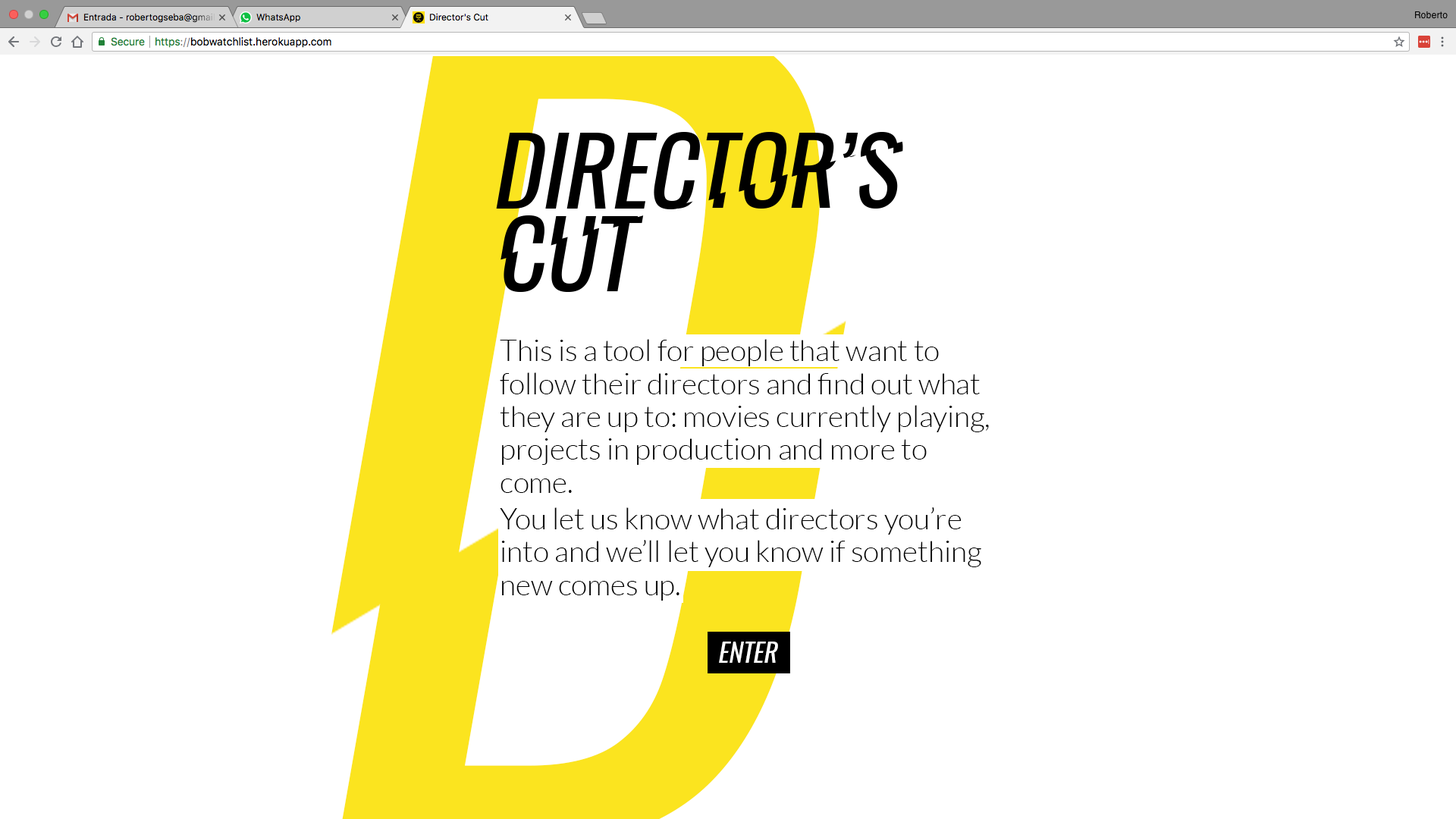
<style>
.page{position:relative;width:1456px;height:819px;background:#ffffff}
.page>*{position:absolute;margin:0}
.t1{font:92.9px/83.4px "Oswald-Regular";letter-spacing:-0.005em;color:#000000;text-transform:uppercase;font-style:italic}
.t2{font:29.6px/32.9px "Lato-Light";letter-spacing:-0.005em;color:#000000}
.t3{font:26.1px "Oswald-Regular";letter-spacing:-0.005em;color:#ffffff;text-transform:uppercase;font-style:italic}
</style>
<div class="page">
<p class="t1" style="left:496px;top:132px;width:402px;height:161px">director’s<br>cut</p>
<p class="t1" style="left:501px;top:131px;width:402px;height:161px">director’s<br>cut</p>
<p class="t2" style="left:500px;top:339px;width:489px;height:262px">This is a tool for people that want to follow their directors and find out what they are up to: movies currently playing, projects in production and more to come.<br>You let us know what directors you’re into and we’ll let you know if something new comes up.</p>
<p class="t3" style="left:719px;top:642px;width:59px;height:21px">enter</p>
</div>
